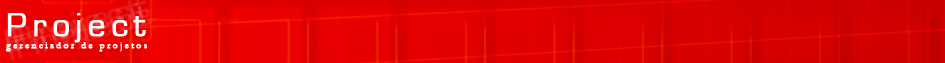
<style>
.page{position:relative;width:945px;height:63px}
.page>*{position:absolute;margin:0}
.t1{font:10px "Garamond";letter-spacing:0.2em;color:#fffefe;font-weight:bold}
</style>
<div class="page">
<p class="t1" style="left:5px;top:42px;width:142px;height:10px">gerenciador de projetos</p>
</div>
